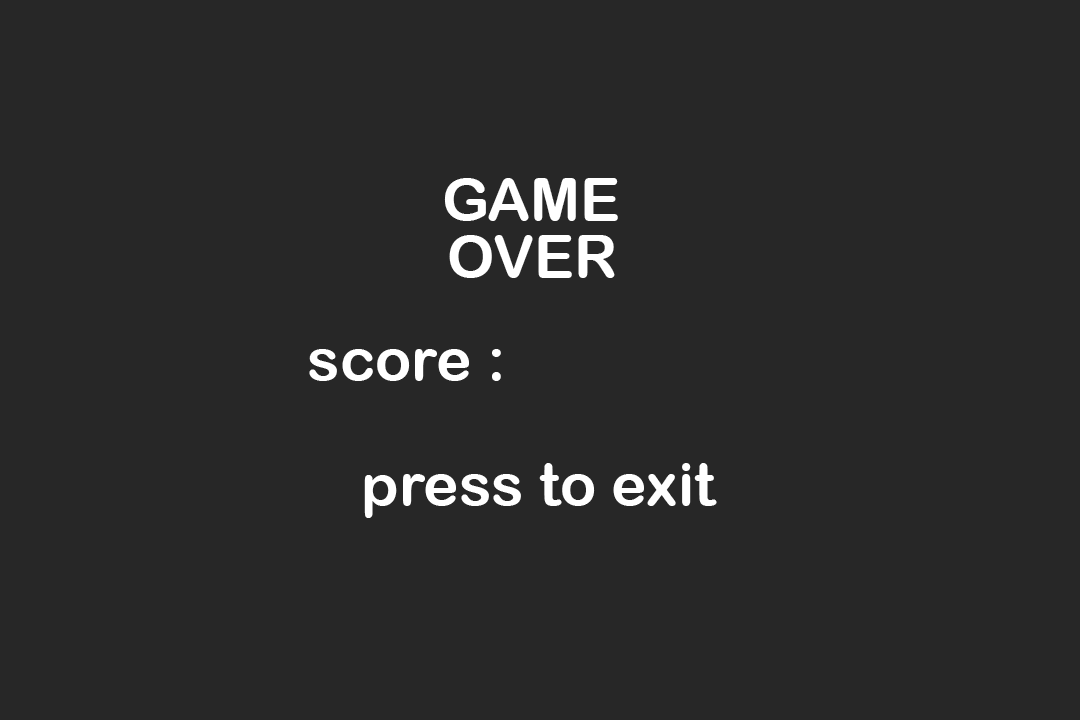
<style>
.page{position:relative;width:1080px;height:720px;background:#272727}
.page>*{position:absolute;margin:0}
.t1{font:60px "ArialRoundedMTBold";color:#ffffff}
</style>
<div class="page">
<p class="t1" style="left:444px;top:178px;width:174px;height:43px">GAME</p>
<p class="t1" style="left:449px;top:235px;width:166px;height:43px">OVER</p>
<p class="t1" style="left:309px;top:349px;width:192px;height:32px">score :</p>
<p class="t1" style="left:364px;top:463px;width:353px;height:55px">press to exit</p>
</div>
